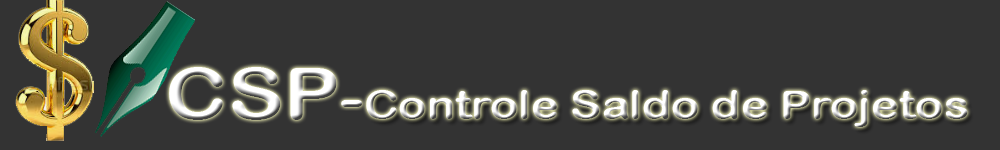
<style>
.page{position:relative;width:1000px;height:150px;background:#333333}
.page>*{position:absolute;margin:0}
.t1{font:72px "ArialRoundedMTBold";scale:1.17 1}
.t2{font:60px "ArialRoundedMTBold";scale:1.17 1}
.t3{font:40px "ArialRoundedMTBold";scale:1.17 1}
</style>
<div class="page">
<p class="t1" style="left:169px;top:67px;width:194px;height:53px">CSP<span class="t2">-</span></p>
<p class="t3" style="left:366px;top:90px;width:602px;height:37px">Controle Saldo de Projetos</p>
</div>
